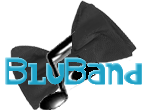
<style>
.page{position:relative;width:150px;height:112px;background:#ffffff}
.page>*{position:absolute;margin:0}
.t1{font:29.2px "Alcohol-Licks-Regular";color:#1fa1c6;scale:0.81 1}
</style>
<div class="page">
<p class="t1" style="left:5px;top:57px;width:137px;height:28px">BluBand</p>
<p class="t1" style="left:5px;top:57px;width:137px;height:28px">BluBand</p>
<p class="t1" style="left:5px;top:57px;width:137px;height:28px">BluBand</p>
</div>
